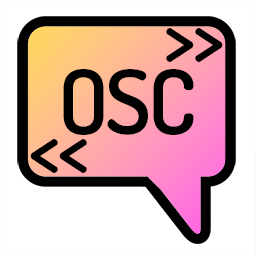
<style>
.page{position:relative;width:256px;height:256px;background:#ffffff}
.page>*{position:absolute;margin:0}
.t1{font:78px "Dosis-SemiBold";letter-spacing:-0.04em;color:#000000}
.t2{font:89.5px "Dosis-SemiBold";letter-spacing:-0.04em;color:#000000}
</style>
<div class="page">
<p class="t1" style="left:166px;top:28px;width:57px;height:34px">&gt;&gt;</p>
<p class="t2" style="left:63px;top:69px;width:131px;height:66px">OSC</p>
<p class="t1" style="left:30px;top:139px;width:57px;height:34px">&lt;&lt;</p>
</div>
